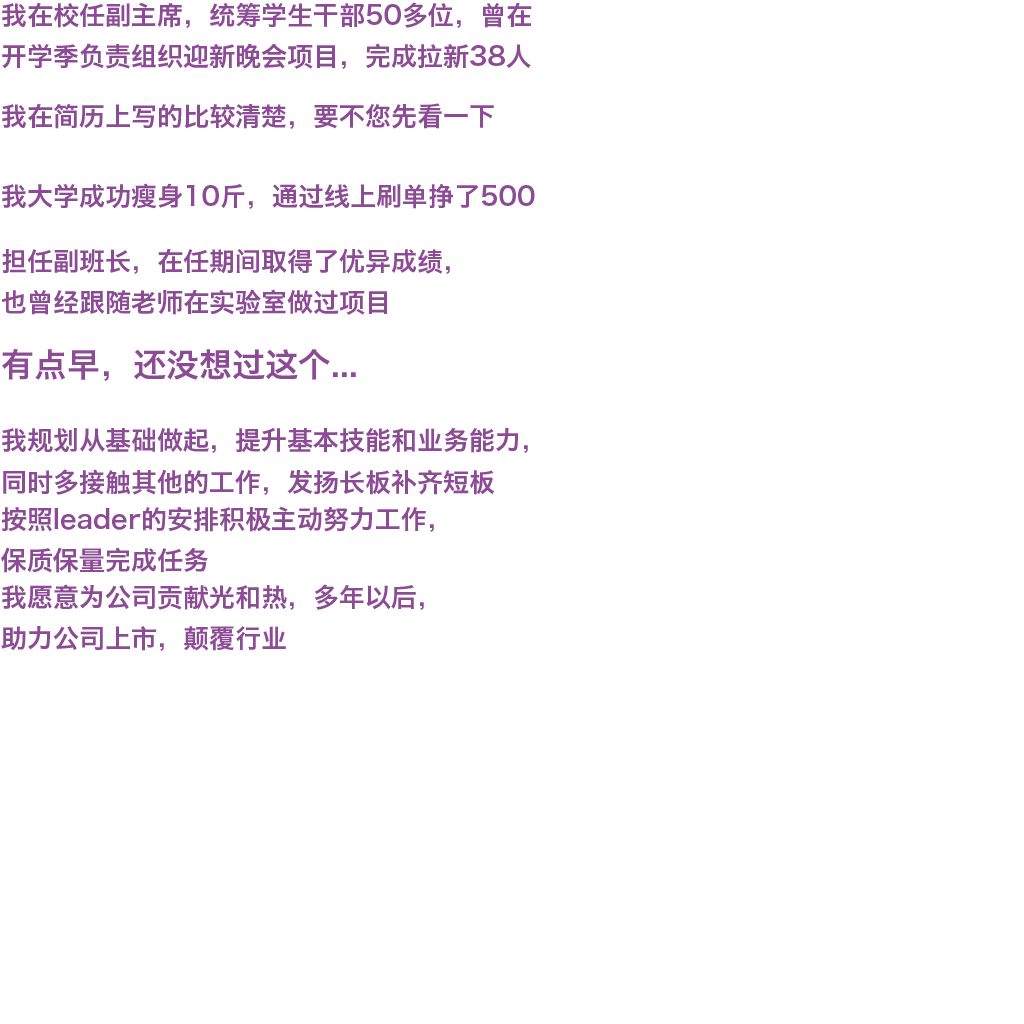
<style>
.page{position:relative;width:1024px;height:1024px;background:#ffffff}
.page>*{position:absolute;margin:0}
.t1{font:26px/41.6px "HiraginoSansGB-W6";color:#8c4b95}
.t2{font:26px "HiraginoSansGB-W6";color:#8c4b95}
.t3{font:33px "HiraginoSansGB-W6";color:#8c4b95}
</style>
<div class="page">
<p class="t1" style="left:2px;top:2px;width:530px;height:67px;text-align:justify">我在校任副主席，统筹学生干部50多位，曾在<br>开学季负责组织迎新晚会项目，完成拉新38人</p>
<p class="t2" style="left:2px;top:103px;width:492px;height:26px">我在简历上写的比较清楚，要不您先看一下</p>
<p class="t2" style="left:2px;top:183px;width:533px;height:26px">我大学成功瘦身10斤，通过线上刷单挣了500</p>
<p class="t1" style="left:2px;top:248px;width:448px;height:67px;text-align:justify">担任副班长，在任期间取得了优异成绩，<br>也曾经跟随老师在实验室做过项目</p>
<p class="t3" style="left:2px;top:349px;width:354px;height:32px">有点早，还没想过这个...</p>
<p class="t1" style="left:2px;top:427px;width:526px;height:68px;text-align:justify">我规划从基础做起，提升基本技能和业务能力，<br>同时多接触其他的工作，发扬长板补齐短板</p>
<p class="t1" style="left:1px;top:506px;width:433px;height:67px;text-align:justify">按照leader的安排积极主动努力工作，<br>保质保量完成任务</p>
<p class="t1" style="left:1px;top:584px;width:423px;height:67px;text-align:justify">我愿意为公司贡献光和热，多年以后，<br>助力公司上市，颠覆行业</p>
</div>
